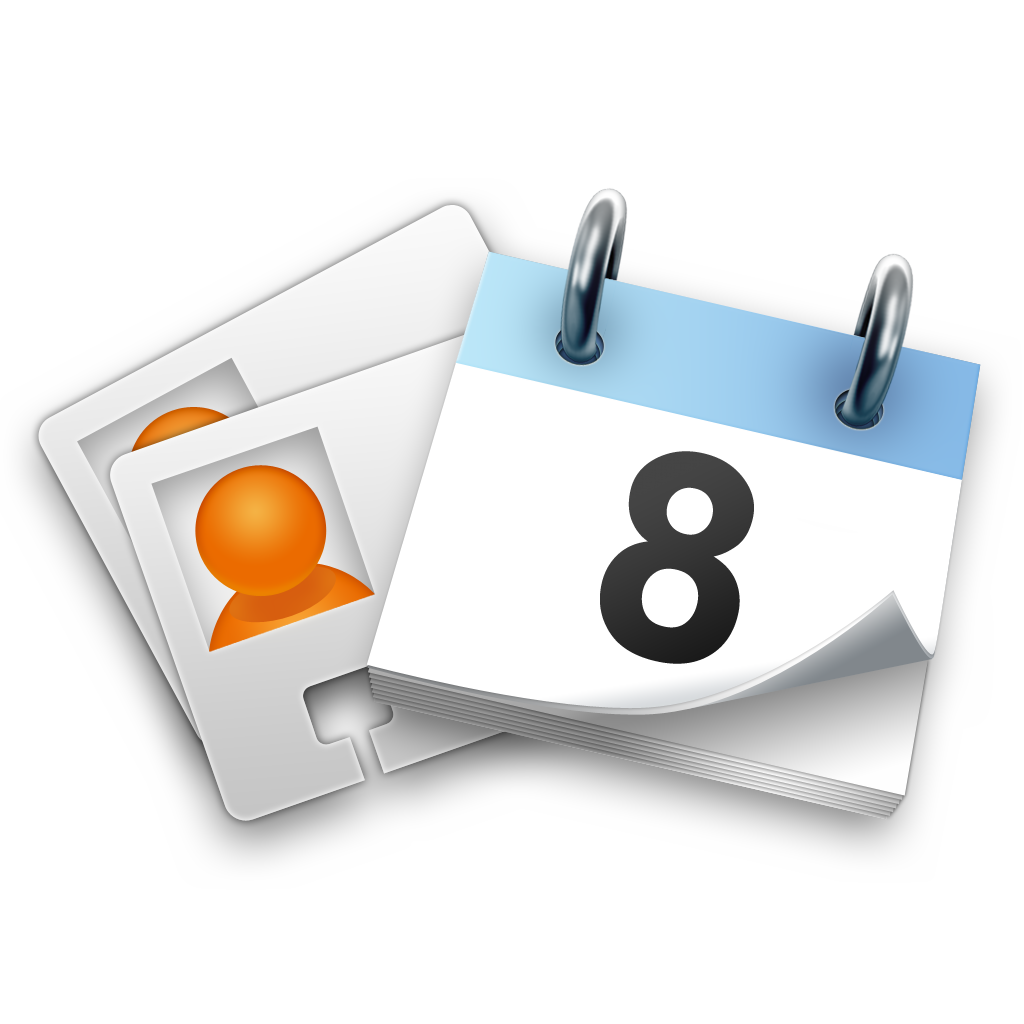
<style>
.page{position:relative;width:1024px;height:1024px;background:#ffffff}
.page>*{position:absolute;margin:0}
.t1{font:282.5px "PreludeWGL-Bold";letter-spacing:0.01em;color:#000000;text-transform:uppercase;font-weight:bold}
</style>
<div class="page">
<p class="t1" style="left:600px;top:451px;width:154px;height:213px;rotate:13deg">8</p>
</div>
